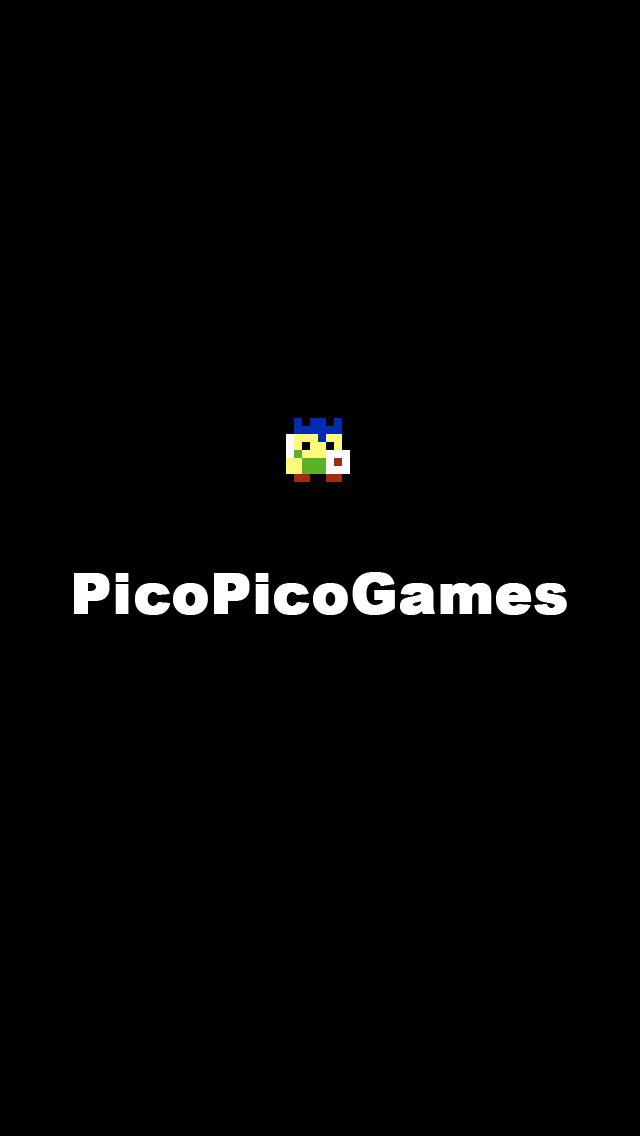
<style>
.page{position:relative;width:640px;height:1136px;background:#000000}
.page>*{position:absolute;margin:0}
.t1{font:96px "Arial-Black";color:#ffffff;font-weight:bold}
</style>
<div class="page">
<p class="t1" style="left:74px;top:572px;width:493px;height:43px">PicoPicoGames</p>
</div>
